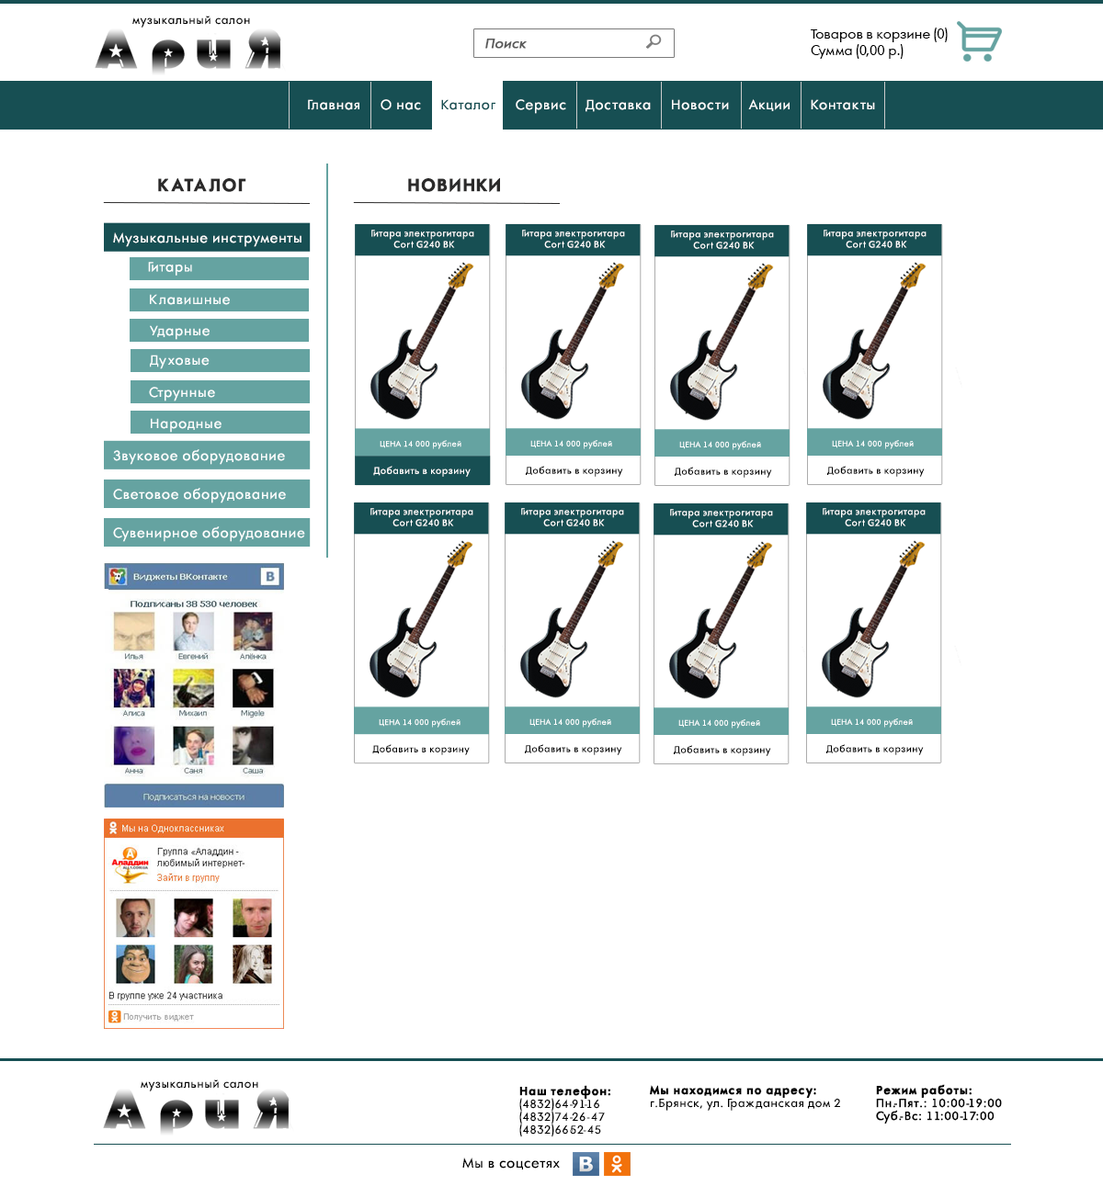
<style>
.page{position:relative;width:1103px;height:1186px;background:#ffffff}
.page>*{position:absolute;margin:0}
.t1{font:11px "AFuturaOrto";letter-spacing:0.05em;color:#000000}
.t2{font:12.9px/16.5px "AFuturaOrto";color:#000000}
.t3{font:12.9px "AFuturaOrto";color:#595959;font-weight:bold;font-style:italic}
.t4{font:12.9px "AFuturaOrto";letter-spacing:0.05em;color:#ffffff}
.t5{font:12.9px "AFuturaOrto";letter-spacing:0.05em;color:#174f53}
.t6{font:16.5px "AFuturaOrtoBold";letter-spacing:0.05em;color:#2b2a2a;text-transform:uppercase;font-weight:bold}
.t7{font:8.7px/11.2px "AFuturaOrto";letter-spacing:0.05em;color:#ffffff}
.t8{font:7.5px "AFuturaOrto";letter-spacing:0.05em;color:#ffffff}
.t9{font:9px "AFuturaOrto";letter-spacing:0.05em;color:#ffffff}
.t10{font:9px "AFuturaOrto";letter-spacing:0.05em;color:#000000}
.t11{font:11px/12.9px "AFuturaOrto";letter-spacing:0.05em;color:#000000}
.t12{font:11px/12.9px "AFuturaOrtoBold";letter-spacing:0.05em;color:#000000;font-weight:bold}
.t13{font:11px/12.9px "AFuturaOrto";letter-spacing:0.05em;color:#000000;font-weight:bold}
.t14{font:12.9px "AFuturaOrto";letter-spacing:0.05em;color:#000000}
</style>
<div class="page">
<p class="t1" style="left:132px;top:16px;width:118px;height:12px">музыкальный салон</p>
<p class="t2" style="left:811px;top:28px;width:137px;height:31px">Товаров в корзине (0)<br>Сумма (0,00 р.)</p>
<p class="t3" style="left:485px;top:39px;width:42px;height:10px">Поиск</p>
<p class="t4" style="left:308px;top:99px;width:567px;height:15px">Главная     О нас  <span class="t5">   Каталог </span>    Сервис     Доставка     Новости     Акции     Контакты</p>
<p class="t6" style="left:158px;top:178px;width:88px;height:14px">каталог</p>
<p class="t6" style="left:408px;top:178px;width:92px;height:14px">Новинки</p>
<p class="t4" style="left:113px;top:233px;width:188px;height:14px">Музыкальные инструменты</p>
<p class="t7" style="left:371px;top:230px;width:103px;height:18px;text-align:center">Гитара электрогитара <br>Cort G240 BK</p>
<p class="t7" style="left:522px;top:230px;width:103px;height:18px;text-align:center">Гитара электрогитара <br>Cort G240 BK</p>
<p class="t7" style="left:671px;top:231px;width:103px;height:18px;text-align:center">Гитара электрогитара <br>Cort G240 BK</p>
<p class="t7" style="left:823px;top:230px;width:103px;height:18px;text-align:center">Гитара электрогитара <br>Cort G240 BK</p>
<p class="t4" style="left:148px;top:262px;width:44px;height:14px">Гитары</p>
<p class="t4" style="left:150px;top:294px;width:80px;height:11px">Клавишные</p>
<p class="t4" style="left:150px;top:325px;width:60px;height:15px">Ударные</p>
<p class="t4" style="left:150px;top:355px;width:60px;height:14px">Духовые</p>
<p class="t4" style="left:149px;top:387px;width:66px;height:15px">Струнные</p>
<p class="t4" style="left:151px;top:418px;width:70px;height:15px">Народные</p>
<p class="t4" style="left:113px;top:449px;width:172px;height:16px">Звуковое оборудование</p>
<p class="t8" style="left:380px;top:440px;width:81px;height:9px">ЦЕНА 14 000 рублей</p>
<p class="t8" style="left:530px;top:440px;width:82px;height:9px">ЦЕНА 14 000 рублей</p>
<p class="t8" style="left:679px;top:441px;width:82px;height:9px">ЦЕНА 14 000 рублей</p>
<p class="t8" style="left:832px;top:440px;width:82px;height:9px">ЦЕНА 14 000 рублей</p>
<p class="t9" style="left:373px;top:466px;width:98px;height:11px">Добавить в корзину</p>
<p class="t10" style="left:526px;top:466px;width:97px;height:11px">Добавить в корзину</p>
<p class="t10" style="left:675px;top:467px;width:97px;height:11px">Добавить в корзину</p>
<p class="t10" style="left:827px;top:466px;width:98px;height:11px">Добавить в корзину</p>
<p class="t4" style="left:113px;top:488px;width:173px;height:16px">Световое оборудование</p>
<p class="t7" style="left:370px;top:508px;width:103px;height:19px;text-align:center">Гитара электрогитара <br>Cort G240 BK</p>
<p class="t7" style="left:521px;top:508px;width:103px;height:19px;text-align:center">Гитара электрогитара <br>Cort G240 BK</p>
<p class="t7" style="left:670px;top:509px;width:103px;height:19px;text-align:center">Гитара электрогитара <br>Cort G240 BK</p>
<p class="t7" style="left:823px;top:508px;width:102px;height:19px;text-align:center">Гитара электрогитара <br>Cort G240 BK</p>
<p class="t4" style="left:113px;top:527px;width:192px;height:15px">Сувенирное оборудование</p>
<p class="t8" style="left:379px;top:719px;width:81px;height:9px">ЦЕНА 14 000 рублей</p>
<p class="t8" style="left:529px;top:719px;width:82px;height:9px">ЦЕНА 14 000 рублей</p>
<p class="t8" style="left:678px;top:720px;width:82px;height:9px">ЦЕНА 14 000 рублей</p>
<p class="t8" style="left:831px;top:719px;width:82px;height:9px">ЦЕНА 14 000 рублей</p>
<p class="t10" style="left:372px;top:744px;width:98px;height:11px">Добавить в корзину</p>
<p class="t10" style="left:525px;top:744px;width:97px;height:11px">Добавить в корзину</p>
<p class="t10" style="left:674px;top:745px;width:97px;height:11px">Добавить в корзину</p>
<p class="t10" style="left:826px;top:744px;width:98px;height:11px">Добавить в корзину</p>
<p class="t1" style="left:141px;top:1080px;width:117px;height:12px">музыкальный салон</p>
<p class="t11" style="left:519px;top:1085px;width:91px;height:53px"><span class="t12">Наш телефон:<br></span>(4832)64-91-16<br>(4832)74-26-47 <br>(4832)66-52-45</p>
<p class="t11" style="left:650px;top:1085px;width:190px;height:26px"><span class="t12">Мы находимся по адресу:<br></span>г.Брянск, ул. Гражданская дом 2</p>
<p class="t13" style="left:876px;top:1084px;width:126px;height:40px"><span class="t12">Режим работы:<br></span>Пн.-Пят.: 10:00-19:00<br>Суб.-Вс: 11:00-17:00</p>
<p class="t14" style="left:462px;top:1158px;width:98px;height:12px">Мы в соцсетях</p>
</div>
